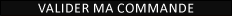
<style>
.page{position:relative;width:232px;height:16px;background:#0d0d0d}
.page>*{position:absolute;margin:0}
.t1{font:14px "Calibri";color:#ffffff;text-transform:uppercase}
</style>
<div class="page">
<p class="t1" style="left:38px;top:3px;width:156px;height:10px">VALIDER MA COMMANDE</p>
</div>
